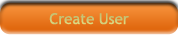
<style>
.page{position:relative;width:178px;height:37px}
.page>*{position:absolute;margin:0}
.t1{font:15px "TrebuchetMS";color:#cecb79}
</style>
<div class="page">
<p class="t1" style="left:49px;top:13px;width:80px;height:12px">Create User</p>
</div>
